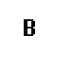
<style>
.page{position:relative;width:59px;height:57px;background:#ffffff}
.page>*{position:absolute;margin:0}
.t1{font:30px "Fixedsys";color:#000000}
</style>
<div class="page">
<p class="t1" style="left:23px;top:19px;width:12px;height:17px">B</p>
</div>
